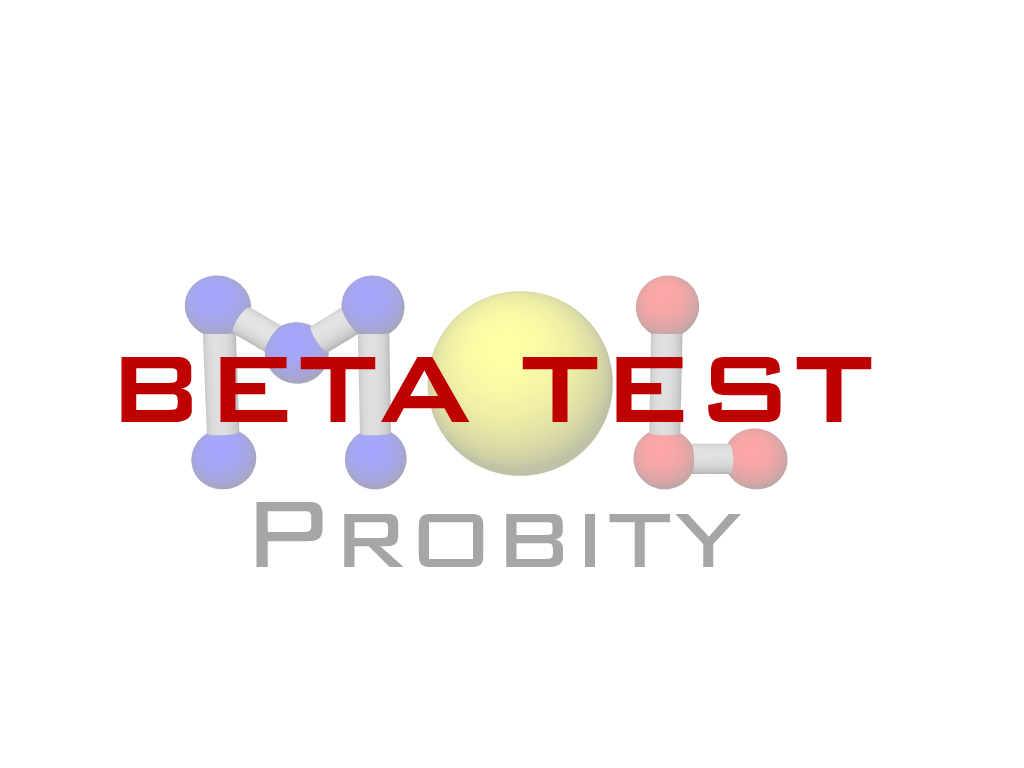
<style>
.page{position:relative;width:1024px;height:768px;background:#ffffff}
.page>*{position:absolute;margin:0}
.t1{font:125px "BankGothic-Medium";color:#be0000}
.t2{font:125px "BankGothicBT-Light";color:#a6a6a6}
</style>
<div class="page">
<p class="t1" style="left:121px;top:357px;width:751px;height:65px">BETA TEST</p>
<p class="t2" style="left:256px;top:502px;width:485px;height:65px">Probity</p>
</div>
